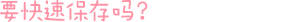
<style>
.page{position:relative;width:289px;height:22px;background:#ffffff}
.page>*{position:absolute;margin:0}
.t1{font:26px "¢è?";color:#ff93a5}
</style>
<div class="page">
<p class="t1" style="left:0px;top:0px;width:148px;height:22px">要快速保存吗？</p>
</div>
